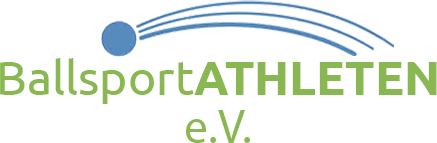
<style>
.page{position:relative;width:437px;height:143px;background:#ffffff}
.page>*{position:absolute;margin:0}
.t1{font:48px/48px "Ubuntu-Regular";color:#89b852}
.t2{font:48px/48px "Ubuntu-Bold";color:#89b852}
.t3{font:48px/48px "MyriadPro-Regular";color:#89b852}
</style>
<div class="page">
<p class="t1" style="left:0px;top:58px;width:437px;height:85px;text-align:center">Ballsport<span class="t2">ATHLETEN<br></span><span class="t3">e.V.</span></p>
</div>
